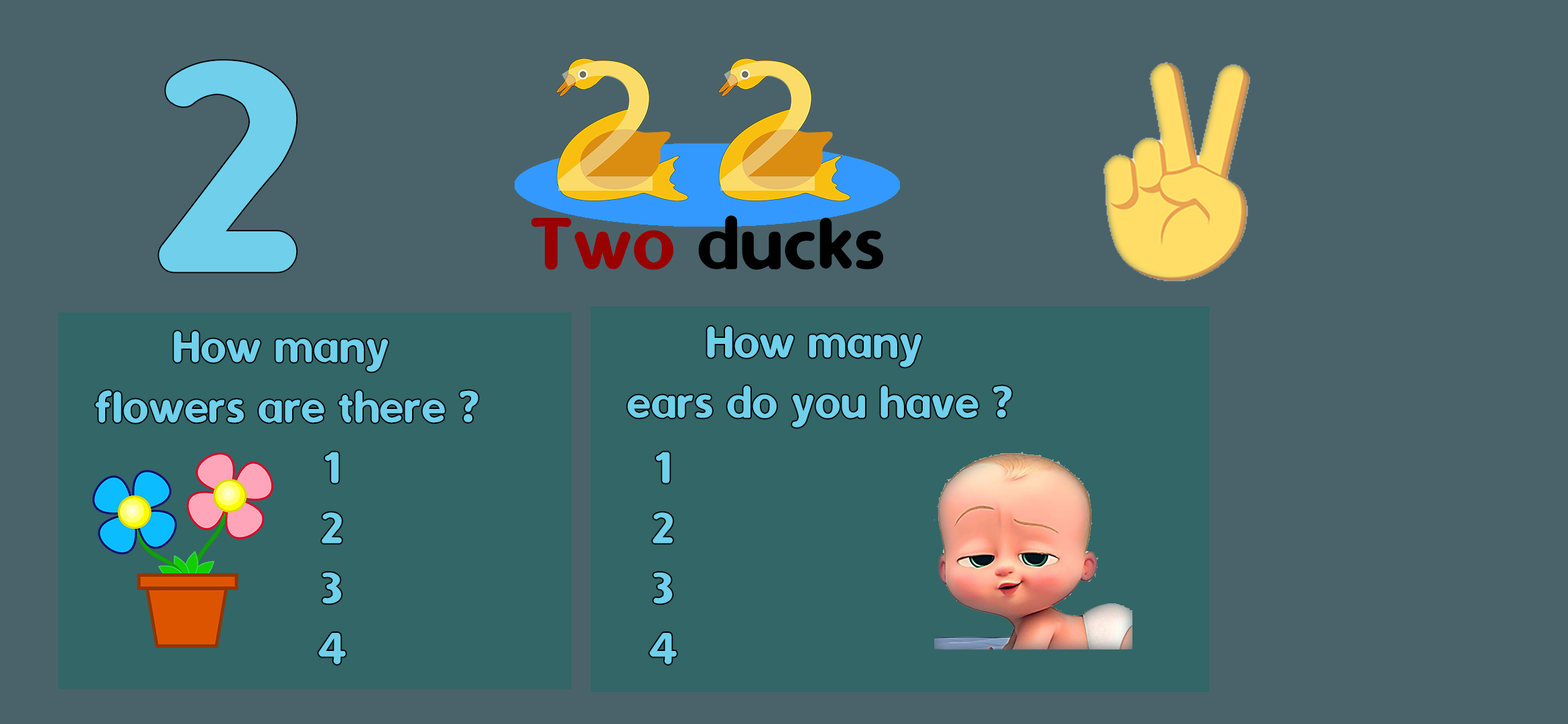
<style>
.page{position:relative;width:1568px;height:724px;background:#4a636b}
.page>*{position:absolute;margin:0}
.t1{font:345.7px "Dyuthi";color:#70d0eb}
.t2{font:50.3px "Dyuthi";color:#70d0eb}
</style>
<div class="page">
<p class="t1" style="left:159px;top:60px;width:138px;height:212px">2</p>
<p class="t2" style="left:627px;top:326px;width:385px;height:102px;text-align:center">How many <br>ears do you have ?</p>
<p class="t2" style="left:95px;top:331px;width:383px;height:92px;text-align:center">How many <br>flowers are there ?</p>
<p class="t2" style="left:318px;top:452px;width:28px;height:212px;text-align:center">1<br>2<br>3<br>4</p>
<p class="t2" style="left:649px;top:452px;width:28px;height:212px;text-align:center">1<br>2<br>3<br>4</p>
</div>
